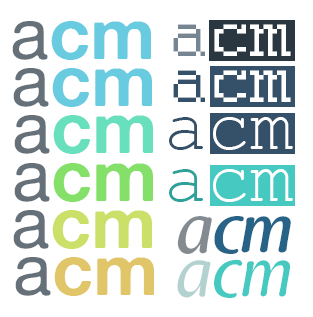
<style>
.page{position:relative;width:313px;height:317px;background:#ffffff}
.page>*{position:absolute;margin:0}
.t1{font:72px "AlteHaasGrotesk_Bold";color:#69cbe0}
.t2{font:72px "AlteHaasGrotesk";color:#667078}
.t3{font:72px "Courier";color:#ffffff}
.t4{font:72px "Courier";color:#758592}
.t5{font:72px "Courier";color:#345169}
.t6{font:72px "AlteHaasGrotesk_Bold";color:#69e0bd}
.t7{font:72px "AlteHaasGrotesk_Bold";color:#85e069}
.t8{font:72px "AlteHaasGrotesk_Bold";color:#cbe069}
.t9{font:65px "RaspoutineMedium";color:#266386}
.t10{font:65px "RaspoutineMedium";color:#838a90}
.t11{font:72px "AlteHaasGrotesk_Bold";color:#e0c569}
.t12{font:65px "RaspoutineClassic";color:#45c9c1}
.t13{font:65px "RaspoutineClassic";color:#b2d1cf}
</style>
<div class="page">
<p class="t1" style="left:12px;top:21px;width:139px;height:39px"><span class="t2">a</span>cm</p>
<p class="t3" style="left:173px;top:24px;width:118px;height:32px"><span class="t4">a</span>cm</p>
<p class="t1" style="left:13px;top:68px;width:139px;height:39px"><span class="t2">a</span>cm</p>
<p class="t3" style="left:173px;top:70px;width:118px;height:32px"><span class="t5">a</span>cm</p>
<p class="t6" style="left:14px;top:115px;width:139px;height:39px"><span class="t2">a</span>cm</p>
<p class="t7" style="left:14px;top:163px;width:139px;height:39px"><span class="t2">a</span>cm</p>
<p class="t8" style="left:13px;top:210px;width:139px;height:39px"><span class="t2">a</span>cm</p>
<p class="t9" style="left:177px;top:216px;width:114px;height:38px"><span class="t10">a</span>cm</p>
<p class="t11" style="left:15px;top:257px;width:139px;height:39px"><span class="t2">a</span>cm</p>
<p class="t12" style="left:177px;top:259px;width:113px;height:39px"><span class="t13">a</span>cm</p>
</div>
